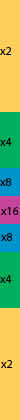
<style>
.page{position:relative;width:20px;height:420px;background:#ffcf5b}
.page>*{position:absolute;margin:0}
.t1{font:12px "MyriadPro-Regular";color:#000000}
</style>
<div class="page">
<p class="t1" style="left:0px;top:47px;width:12px;height:8px">x2</p>
<p class="t1" style="left:0px;top:138px;width:12px;height:8px">x4</p>
<p class="t1" style="left:0px;top:178px;width:12px;height:8px">x8</p>
<p class="t1" style="left:1px;top:207px;width:18px;height:8px">x16</p>
<p class="t1" style="left:1px;top:233px;width:12px;height:8px">x8</p>
<p class="t1" style="left:0px;top:275px;width:12px;height:8px">x4</p>
<p class="t1" style="left:1px;top:360px;width:12px;height:8px">x2</p>
</div>
